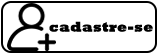
<style>
.page{position:relative;width:160px;height:55px;background:#ffffff}
.page>*{position:absolute;margin:0}
.t1{font:14px "Rockwell-ExtraBold";letter-spacing:0.025em;color:#000000}
</style>
<div class="page">
<p class="t1" style="left:49px;top:21px;width:104px;height:11px">cadastre-seeeee</p>
</div>
